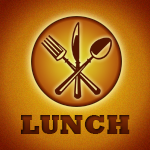
<style>
.page{position:relative;width:150px;height:150px}
.page>*{position:absolute;margin:0}
.t1{font:28.1px "Rockwell-ExtraBold"}
</style>
<div class="page">
<p class="t1" style="left:21px;top:115px;width:109px;height:19px">LUNCH</p>
</div>
